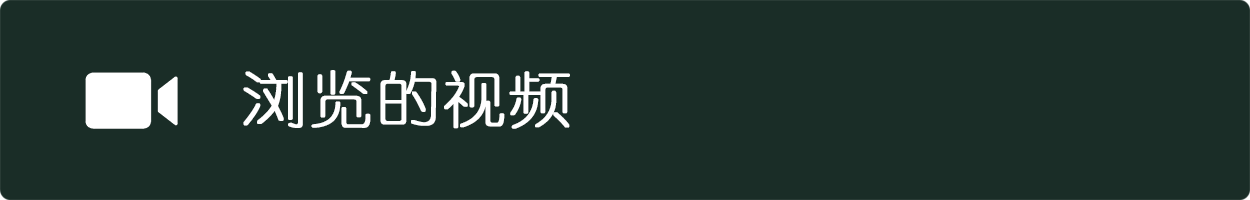
<style>
.page{position:relative;width:1250px;height:200px;background:#1a2d27}
.page>*{position:absolute;margin:0}
.t1{font:60.8px "YouYuan";letter-spacing:0.01em;color:#ffffff;font-weight:bold;scale:1.05 1}
</style>
<div class="page">
<p class="t1" style="left:243px;top:70px;width:327px;height:59px">浏览的视频</p>
</div>
